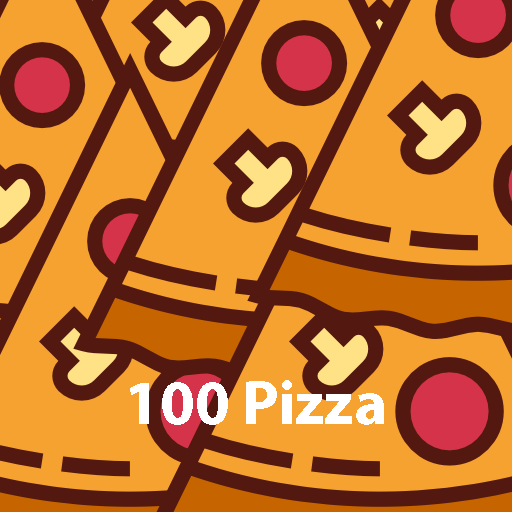
<style>
.page{position:relative;width:512px;height:512px;background:#f6a230}
.page>*{position:absolute;margin:0}
.t1{font:62.5px "MyriadPro-Bold";color:#ffffff}
</style>
<div class="page">
<p class="t1" style="left:130px;top:380px;width:254px;height:45px">100 Pizza</p>
</div>
